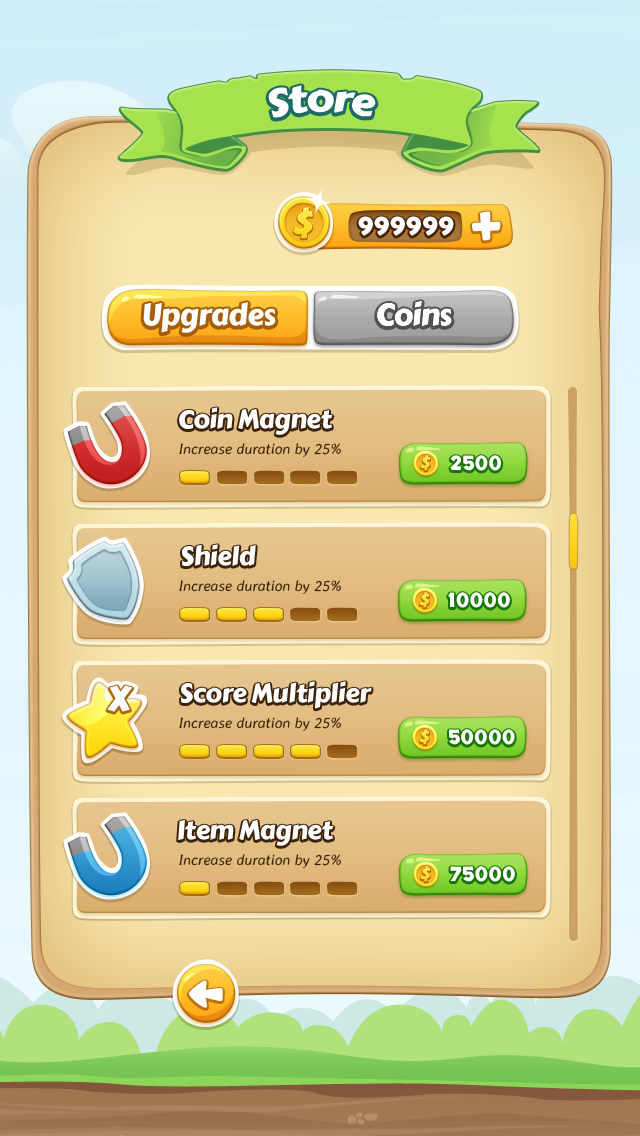
<style>
.page{position:relative;width:640px;height:1136px}
.page>*{position:absolute;margin:0}
.t1{font:38px "CarterOne";letter-spacing:-0.02em;color:#ffffff}
.t2{font:25px "Skranji-Bold";letter-spacing:0.025em;color:#ffffff}
.t3{font:30px "CarterOne";letter-spacing:-0.02em;color:#ffffff}
.t4{font:26px "CarterOne";letter-spacing:-0.02em;color:#ffffff}
.t5{font:15px "AveriaSansLibre-LightItalic";color:#3a230a}
.t6{font:20px "Skranji-Bold";letter-spacing:0.025em;color:#ffffff}
</style>
<div class="page">
<p class="t1" style="left:268px;top:85px;width:108px;height:33px">Store</p>
<p class="t2" style="left:358px;top:216px;width:96px;height:20px">999999</p>
<p class="t3" style="left:143px;top:302px;width:133px;height:31px">Upgrades</p>
<p class="t3" style="left:377px;top:301px;width:75px;height:25px">Coins</p>
<p class="t4" style="left:179px;top:407px;width:154px;height:28px">Coin Magnet</p>
<p class="t5" style="left:179px;top:443px;width:162px;height:15px">Increase duration by 25%</p>
<p class="t6" style="left:450px;top:455px;width:52px;height:16px">2500</p>
<p class="t4" style="left:182px;top:544px;width:74px;height:22px">Shield</p>
<p class="t5" style="left:179px;top:580px;width:162px;height:15px">Increase duration by 25%</p>
<p class="t6" style="left:448px;top:592px;width:62px;height:16px">10000</p>
<p class="t4" style="left:181px;top:681px;width:191px;height:28px">Score Multiplier</p>
<p class="t5" style="left:179px;top:717px;width:162px;height:15px">Increase duration by 25%</p>
<p class="t6" style="left:449px;top:729px;width:66px;height:16px">50000</p>
<p class="t4" style="left:178px;top:820px;width:156px;height:26px">Item Magnet</p>
<p class="t5" style="left:179px;top:854px;width:162px;height:15px">Increase duration by 25%</p>
<p class="t6" style="left:450px;top:866px;width:65px;height:16px">75000</p>
</div>
